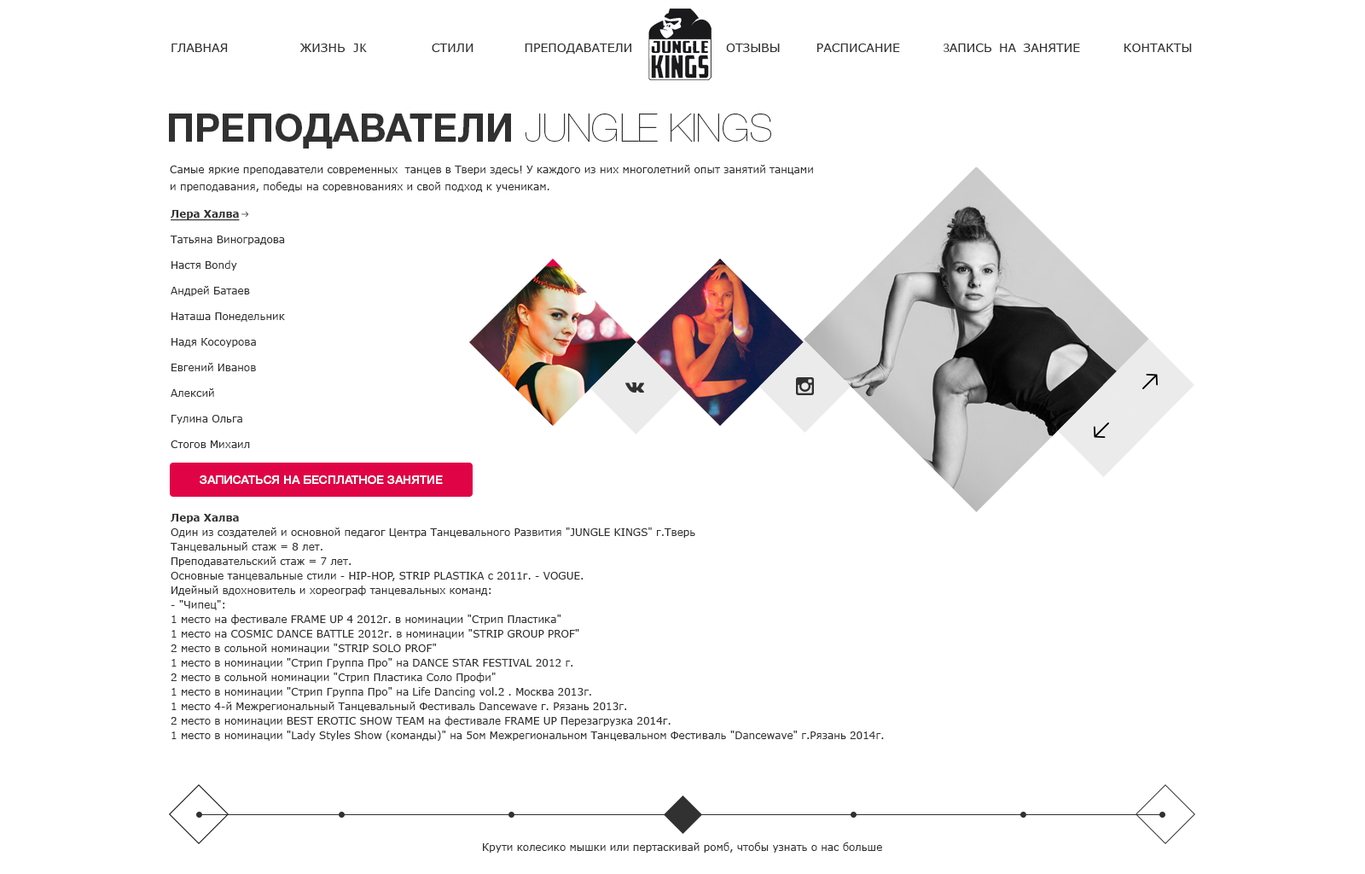
<style>
.page{position:relative;width:1365px;height:874px;background:#ffffff}
.page>*{position:absolute;margin:0}
.t1{font:11.9px "Verdana";color:#313131;text-transform:uppercase}
.t2{font:11.9px "LucidaSans-Typewriter";color:#313131;text-transform:uppercase}
.t3{font:11.9px "MinionPro-Regular";color:#313131;text-transform:uppercase}
.t4{font:38.4px "HelveticaNeueCyr-Bold";color:#313131}
.t5{font:38.4px "HelveticaNeueCyr-UltraLight";color:#313131}
.t6{font:10.2px/17.1px "Verdana";color:#313131}
.t7{font:10.2px/25.6px "Verdana";color:#313131}
.t8{font:10.2px/25.6px "Verdana-Bold";color:#313131;text-decoration:underline}
.t9{font:11.9px "HelveticaNeueCyr-Medium";color:#ffffff}
.t10{font:10.2px/14.5px "Verdana";color:#313131}
.t11{font:10.2px/14.5px "Verdana-Bold";color:#313131}
.t12{font:10.2px "Verdana";color:#313131}
</style>
<div class="page">
<p class="t1" style="left:171px;top:44px;width:1021px;height:10px">главная          жизнь<span class="t2"> jk         </span>стили       преподаватели             отзывы     расписание      <span class="t3">з</span>апись на занятие      контакты</p>
<p class="t4" style="left:169px;top:113px;width:602px;height:35px">ПРЕПОДАВАТЕЛИ <span class="t5">JUNGLE KINGS</span></p>
<p class="t6" style="left:170px;top:165px;width:643px;height:27px">Самые яркие преподаватели современных  танцев в Твери здесь! У каждого из них многолетний опыт занятий танцами и преподавания, победы на соревнованиях и свой подход к ученикам.</p>
<p class="t7" style="left:170px;top:210px;width:115px;height:238px"><span class="t8">Лера Халва<br></span>Татьяна Виноградова<br>Настя Bondy<br>Андрей Батаев<br>Наташа Понедельник<br>Надя Косоурова<br>Евгений Иванов<br>Алексий<br>Гулина Ольга<br>Стогов Михаил</p>
<p class="t9" style="left:200px;top:475px;width:243px;height:9px">ЗАПИСАТЬСЯ НА БЕСПЛАТНОЕ ЗАНЯТИЕ</p>
<p class="t10" style="left:170px;top:514px;width:714px;height:227px"><span class="t11">Лера Халва <br></span>Один из создателей и основной педагог Центра Танцевального Развития "JUNGLE KINGS" г.Тверь <br>Танцевальный стаж = 8 лет. <br>Преподавательский стаж = 7 лет. <br>Основные танцевальные стили - HIP-HOP, STRIP PLASTIKA с 2011г. - VOGUE. <br>Идейный вдохновитель и хореограф танцевальных команд: <br>- "Чипец": <br>1 место на фестивале FRAME UP 4 2012г. в номинации "Стрип Пластика" <br>1 место на COSMIC DANCE BATTLE 2012г. в номинации "STRIP GROUP PROF" <br>2 место в сольной номинации "STRIP SOLO PROF" <br>1 место в номинации "Стрип Группа Про" на DANCE STAR FESTIVAL 2012 г. <br>2 место в сольной номинации "Стрип Пластика Соло Профи" <br>1 место в номинации "Стрип Группа Про" на Life Dancing vol.2 . Москва 2013г. <br>1 место 4-й Межрегиональный Танцевальный Фестиваль Dancewave г. Рязань 2013г. <br>2 место в номинации BEST EROTIC SHOW TEAM на фестивале FRAME UP Перезагрузка 2014г. <br>1 место в номинации "Lady Styles Show (команды)" на 5ом Межрегиональном Танцевальном Фестиваль "Dancewave" г.Рязань 2014г.</p>
<p class="t12" style="left:483px;top:842px;width:399px;height:10px">Крути колесико мышки или пертаскивай ромб, чтобы узнать о нас больше</p>
</div>
